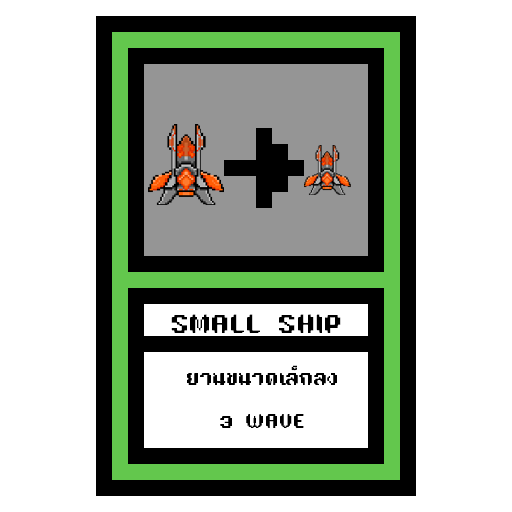
<style>
.page{position:relative;width:512px;height:512px;background:#ffffff}
.page>*{position:absolute;margin:0}
.t1{font:24px "TA16BIT-Regular";color:#000000}
.t2{font:18px "TA16BIT-Regular";color:#000000}
</style>
<div class="page">
<p class="t1" style="left:171px;top:314px;width:170px;height:19px">SMALL SHIP</p>
<p class="t2" style="left:187px;top:365px;width:150px;height:63px;text-align:center">ยานขนาดเล็กลง<br><br>3 WAVE</p>
</div>
